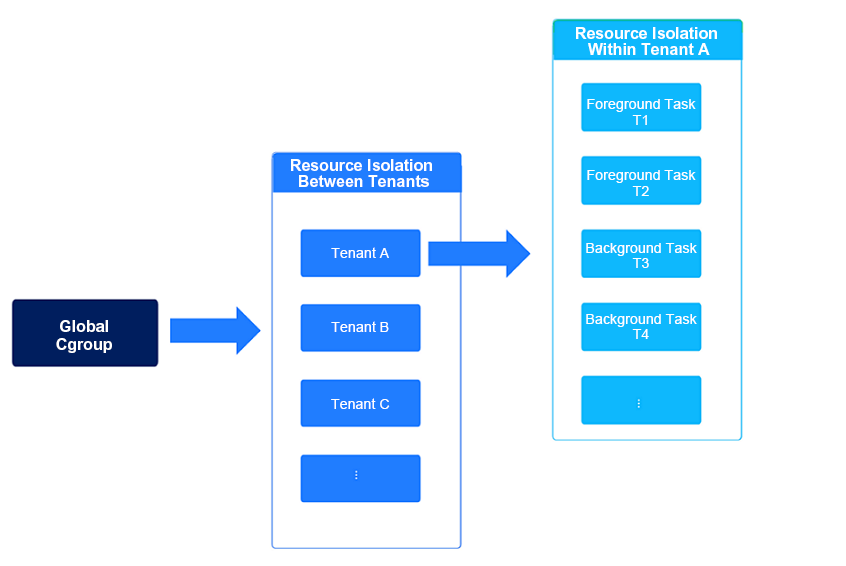
<style>
.page{position:relative;width:846px;height:566px;background:#ffffff}
.page>*{position:absolute;margin:0}
.t1{font:16px/16px "Arial-BoldMT";color:#ffffff}
.t2{font:14.3px/15.4px "ArialMT";color:#ffffff}
.t3{font:14.3px "ArialMT";color:#ffffff}
.t4{font:16px/18px "Arial-BoldMT";color:#ffffff}
</style>
<div class="page">
<p class="t1" style="left:576px;top:27px;width:141px;height:28px;text-align:center">Resource Isolation <br>Within Tenant A</p>
<p class="t2" style="left:587px;top:99px;width:109px;height:26px;text-align:center">Foreground Task<br>T1</p>
<p class="t1" style="left:291px;top:159px;width:141px;height:28px;text-align:center">Resource Isolation <br>Between Tenants</p>
<p class="t2" style="left:587px;top:170px;width:109px;height:26px;text-align:center">Foreground Task<br>T2</p>
<p class="t2" style="left:586px;top:243px;width:111px;height:25px;text-align:center">Background Task<br>T3</p>
<p class="t3" style="left:331px;top:247px;width:58px;height:11px">Tenant A</p>
<p class="t2" style="left:586px;top:314px;width:111px;height:25px;text-align:center">Background Task<br>T4</p>
<p class="t4" style="left:56px;top:320px;width:56px;height:33px;text-align:center">Global<br>Cgroup</p>
<p class="t3" style="left:331px;top:321px;width:58px;height:11px">Tenant B</p>
<p class="t3" style="left:331px;top:398px;width:59px;height:11px">Tenant C</p>
</div>
